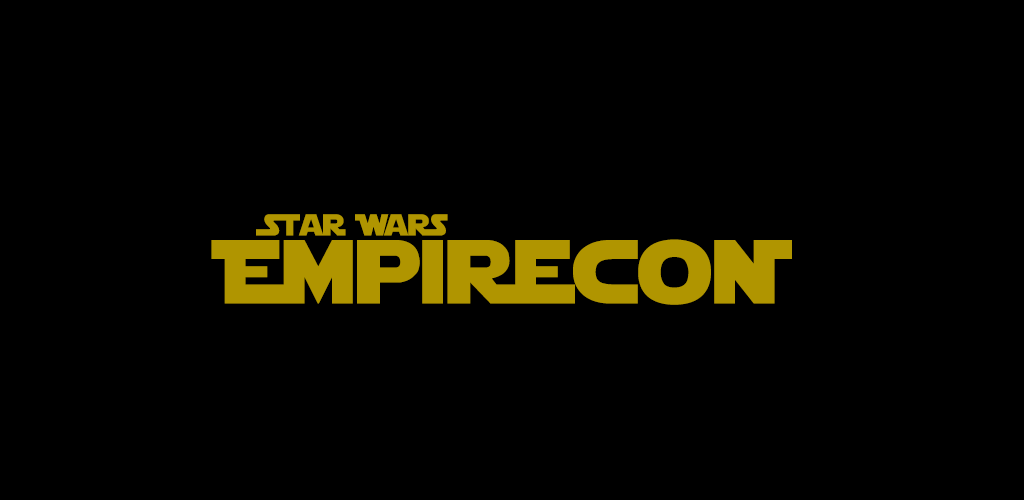
<style>
.page{position:relative;width:1024px;height:500px;background:#000000}
.page>*{position:absolute;margin:0}
.t1{font:30px "StarJedi";color:#b09500}
.t2{font:90px "StarJedi";color:#b09500}
</style>
<div class="page">
<p class="t1" style="left:256px;top:214px;width:192px;height:22px">Star Wars</p>
<p class="t2" style="left:211px;top:239px;width:581px;height:66px">EmpirecoN</p>
</div>
